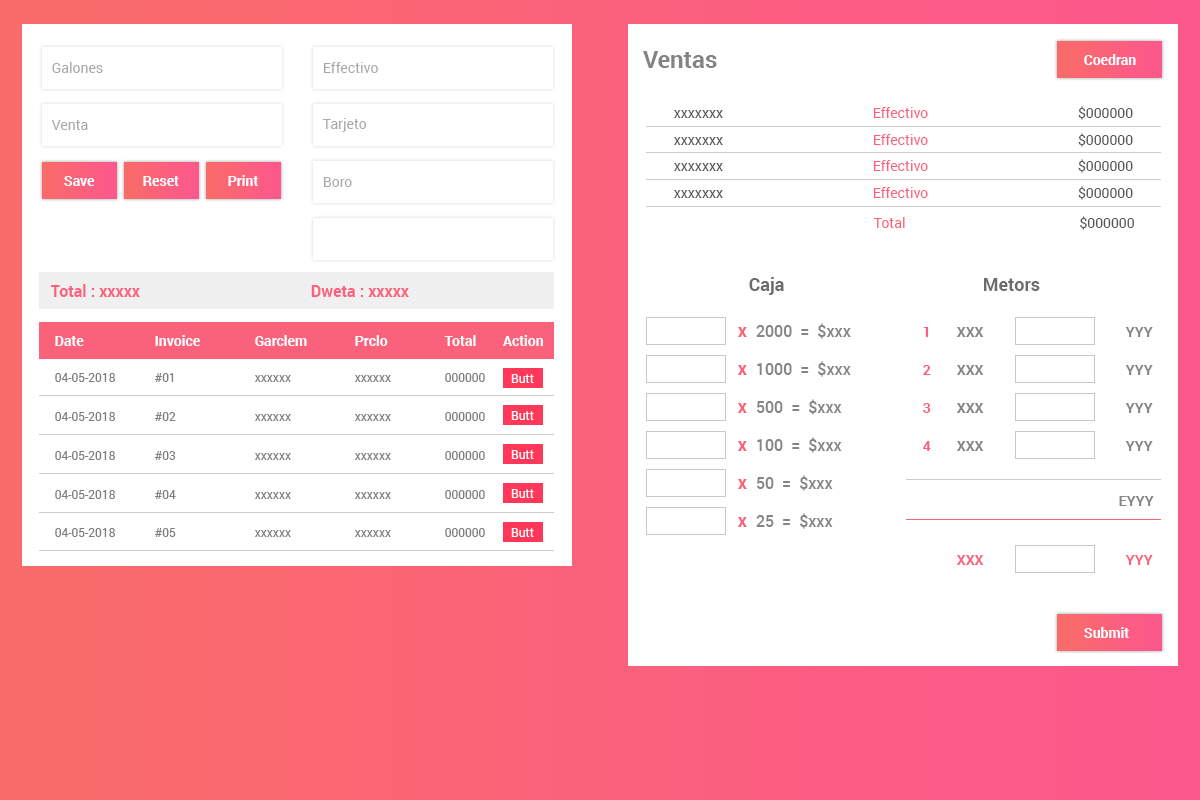
<style>
.page{position:relative;width:1200px;height:800px;background:#ffffff}
.page>*{position:absolute;margin:0}
.t1{font:24px "Roboto-Bold";color:#838383}
.t2{font:14px "Roboto-Bold";color:#ffffff}
.t3{font:14px "Roboto-Regular";color:#a8a8a8}
.t4{font:14px "Roboto-Regular";color:#fa627b}
.t5{font:14px "Roboto-Regular";color:#545454}
.t6{font:18px "Roboto-Bold";color:#6c6c6c}
.t7{font:16px "Roboto-Bold";color:#fb617b}
.t8{font:16px "Roboto-Medium";color:#858585}
.t9{font:18px "Roboto-Bold";color:#fb617b}
.t10{font:14px "Roboto-Bold";color:#fb617b}
.t11{font:14px "Roboto-Bold";color:#858585}
.t12{font:12px "Roboto-Regular";color:#7f7f7f}
.t13{font:12px "Roboto-Regular";color:#ffffff}
.t14{font:14px "Roboto-Bold";color:#fa627b}
</style>
<div class="page">
<p class="t1" style="left:643px;top:51px;width:74px;height:17px">Ventas</p>
<p class="t2" style="left:1084px;top:54px;width:52px;height:11px">Coedran</p>
<p class="t3" style="left:52px;top:62px;width:51px;height:11px">Galones</p>
<p class="t3" style="left:323px;top:62px;width:55px;height:11px">Effectivo</p>
<p class="t4" style="left:674px;top:106px;width:459px;height:14px"><span class="t5">xxxxxxx                                           </span>Effectivo                                           <span class="t5">$000000</span></p>
<p class="t3" style="left:51px;top:120px;width:37px;height:10px">Venta</p>
<p class="t3" style="left:322px;top:118px;width:45px;height:14px">Tarjeto</p>
<p class="t4" style="left:674px;top:133px;width:459px;height:14px"><span class="t5">xxxxxxx                                           </span>Effectivo                                           <span class="t5">$000000</span></p>
<p class="t4" style="left:674px;top:159px;width:459px;height:14px"><span class="t5">xxxxxxx                                           </span>Effectivo                                           <span class="t5">$000000</span></p>
<p class="t2" style="left:64px;top:176px;width:31px;height:10px">Save</p>
<p class="t2" style="left:143px;top:176px;width:36px;height:10px">Reset</p>
<p class="t2" style="left:228px;top:175px;width:30px;height:11px">Print</p>
<p class="t3" style="left:323px;top:177px;width:29px;height:10px">Boro</p>
<p class="t4" style="left:674px;top:186px;width:459px;height:14px"><span class="t5">xxxxxxx                                           </span>Effectivo                                           <span class="t5">$000000</span></p>
<p class="t5" style="left:873px;top:216px;width:261px;height:14px"><span class="t4">Total                                                  </span>$000000</p>
<p class="t6" style="left:749px;top:277px;width:35px;height:18px">Caja</p>
<p class="t6" style="left:984px;top:278px;width:56px;height:13px">Metors</p>
<p class="t7" style="left:51px;top:284px;width:89px;height:13px">Total : xxxxx</p>
<p class="t7" style="left:311px;top:285px;width:98px;height:12px">Dweta : xxxxx</p>
<p class="t8" style="left:737px;top:323px;width:114px;height:16px"><span class="t9">x  </span>2000  =  $xxx</p>
<p class="t10" style="left:923px;top:327px;width:6px;height:10px">1</p>
<p class="t11" style="left:957px;top:327px;width:27px;height:10px">XXX</p>
<p class="t11" style="left:1125px;top:327px;width:28px;height:10px">YYY</p>
<p class="t2" style="left:55px;top:336px;width:29px;height:10px">Date</p>
<p class="t2" style="left:155px;top:335px;width:45px;height:11px">Invoice</p>
<p class="t2" style="left:255px;top:335px;width:52px;height:11px">Garclem</p>
<p class="t2" style="left:355px;top:335px;width:33px;height:11px">Prclo</p>
<p class="t2" style="left:444px;top:335px;width:32px;height:11px">Total</p>
<p class="t2" style="left:503px;top:335px;width:40px;height:11px">Action</p>
<p class="t8" style="left:737px;top:361px;width:114px;height:16px"><span class="t9">x  </span>1000  =  $xxx</p>
<p class="t10" style="left:923px;top:365px;width:8px;height:10px">2</p>
<p class="t11" style="left:957px;top:365px;width:27px;height:10px">XXX</p>
<p class="t11" style="left:1125px;top:365px;width:28px;height:10px">YYY</p>
<p class="t12" style="left:55px;top:373px;width:60px;height:9px">04-05-2018</p>
<p class="t12" style="left:155px;top:373px;width:19px;height:9px">#01</p>
<p class="t12" style="left:254px;top:375px;width:37px;height:7px">xxxxxx</p>
<p class="t12" style="left:354px;top:375px;width:37px;height:7px">xxxxxx</p>
<p class="t12" style="left:445px;top:373px;width:40px;height:9px">000000</p>
<p class="t13" style="left:511px;top:374px;width:23px;height:9px">Butt</p>
<p class="t8" style="left:737px;top:399px;width:105px;height:16px"><span class="t9">x  </span>500  =  $xxx</p>
<p class="t12" style="left:55px;top:412px;width:60px;height:9px">04-05-2018</p>
<p class="t12" style="left:155px;top:412px;width:21px;height:9px">#02</p>
<p class="t12" style="left:254px;top:414px;width:37px;height:7px">xxxxxx</p>
<p class="t12" style="left:354px;top:414px;width:37px;height:7px">xxxxxx</p>
<p class="t12" style="left:445px;top:412px;width:40px;height:9px">000000</p>
<p class="t13" style="left:511px;top:411px;width:23px;height:9px">Butt</p>
<p class="t10" style="left:923px;top:403px;width:8px;height:10px">3</p>
<p class="t11" style="left:957px;top:403px;width:27px;height:10px">XXX</p>
<p class="t11" style="left:1125px;top:403px;width:28px;height:10px">YYY</p>
<p class="t8" style="left:737px;top:437px;width:105px;height:16px"><span class="t9">x  </span>100  =  $xxx</p>
<p class="t10" style="left:923px;top:441px;width:8px;height:10px">4</p>
<p class="t11" style="left:957px;top:441px;width:27px;height:10px">XXX</p>
<p class="t11" style="left:1125px;top:441px;width:28px;height:10px">YYY</p>
<p class="t12" style="left:55px;top:451px;width:60px;height:9px">04-05-2018</p>
<p class="t12" style="left:155px;top:451px;width:21px;height:9px">#03</p>
<p class="t12" style="left:254px;top:453px;width:37px;height:7px">xxxxxx</p>
<p class="t12" style="left:354px;top:453px;width:37px;height:7px">xxxxxx</p>
<p class="t12" style="left:445px;top:451px;width:40px;height:9px">000000</p>
<p class="t13" style="left:511px;top:450px;width:23px;height:9px">Butt</p>
<p class="t8" style="left:737px;top:475px;width:96px;height:16px"><span class="t9">x  </span>50  =  $xxx</p>
<p class="t12" style="left:55px;top:490px;width:60px;height:9px">04-05-2018</p>
<p class="t12" style="left:155px;top:490px;width:21px;height:9px">#04</p>
<p class="t12" style="left:254px;top:492px;width:37px;height:7px">xxxxxx</p>
<p class="t12" style="left:354px;top:492px;width:37px;height:7px">xxxxxx</p>
<p class="t12" style="left:445px;top:490px;width:40px;height:9px">000000</p>
<p class="t13" style="left:511px;top:489px;width:23px;height:9px">Butt</p>
<p class="t11" style="left:1119px;top:496px;width:35px;height:10px">EYYY</p>
<p class="t8" style="left:737px;top:513px;width:96px;height:16px"><span class="t9">x  </span>25  =  $xxx</p>
<p class="t12" style="left:55px;top:528px;width:60px;height:9px">04-05-2018</p>
<p class="t12" style="left:155px;top:528px;width:21px;height:9px">#05</p>
<p class="t12" style="left:254px;top:530px;width:37px;height:7px">xxxxxx</p>
<p class="t12" style="left:354px;top:530px;width:37px;height:7px">xxxxxx</p>
<p class="t12" style="left:445px;top:528px;width:40px;height:9px">000000</p>
<p class="t13" style="left:511px;top:528px;width:23px;height:9px">Butt</p>
<p class="t14" style="left:957px;top:555px;width:27px;height:10px">XXX</p>
<p class="t14" style="left:1125px;top:555px;width:28px;height:10px">YYY</p>
<p class="t2" style="left:1084px;top:627px;width:45px;height:11px">Submit</p>
</div>
